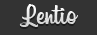
<style>
.page{position:relative;width:97px;height:35px;background:#333333}
.page>*{position:absolute;margin:0}
.t1{font:31.1px "Billabong";color:#e1e1e1}
</style>
<div class="page">
<p class="t1" style="left:19px;top:4px;width:59px;height:23px">Lentio</p>
</div>
